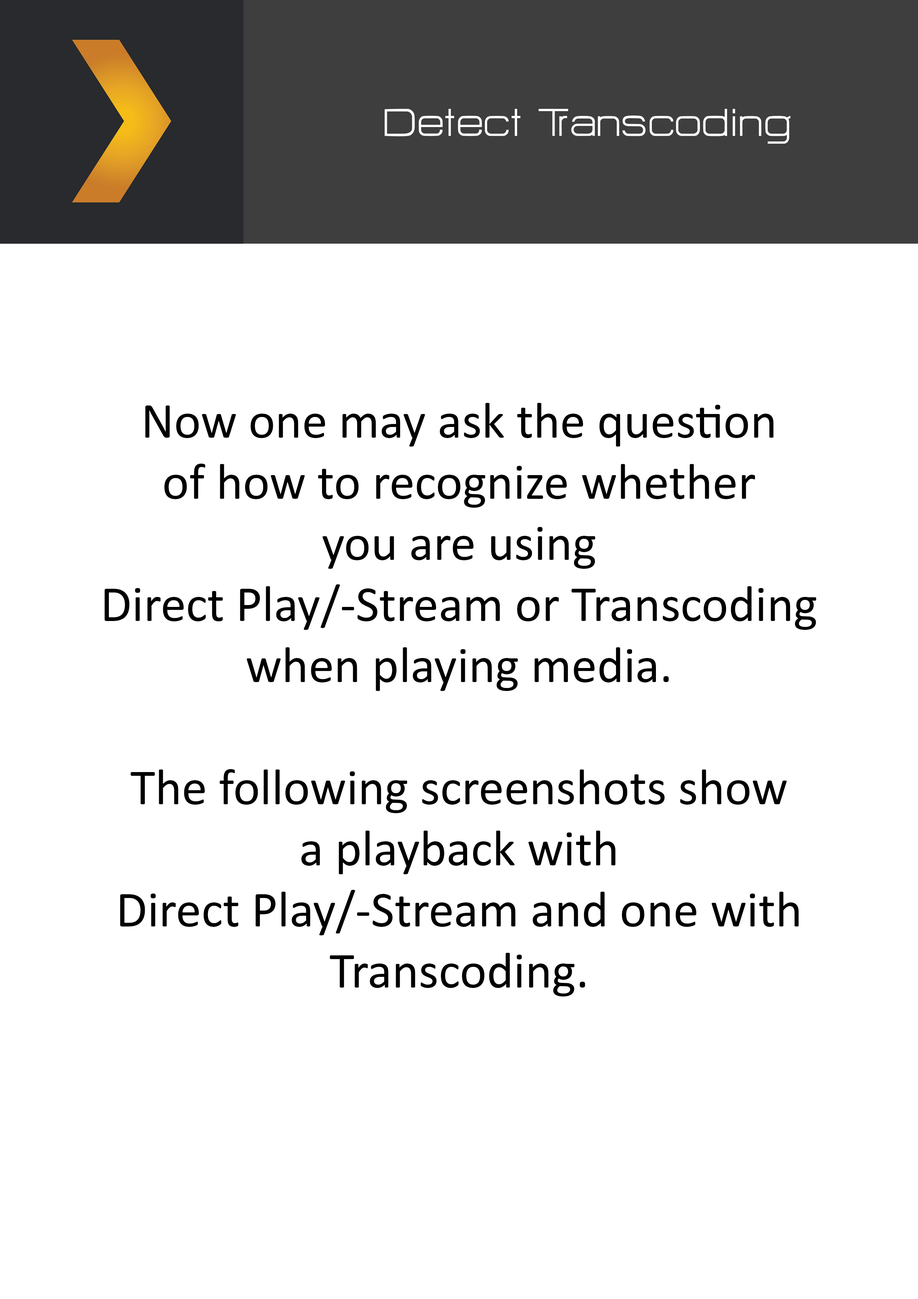
<style>
.page{position:relative;width:918px;height:1299px;background:#ffffff}
.page>*{position:absolute;margin:0}
.t1{font:47.8px "HURTMOLDPersonalUse-Regular";color:#ffffff}
.t2{font:50.9px "Calibri";color:#000000}
</style>
<div class="page">
<p class="t1" style="left:385px;top:109px;width:406px;height:35px">Detect Transcoding</p>
<p class="t2" style="left:104px;top:403px;width:712px;height:593px;text-align:center">Now one may ask the question<br>of how to recognize whether<br>you are using<br>Direct Play/-Stream or Transcoding<br>when playing media.<br><br>The following screenshots show<br>a playback with<br>Direct Play/-Stream and one with<br>Transcoding.</p>
</div>
